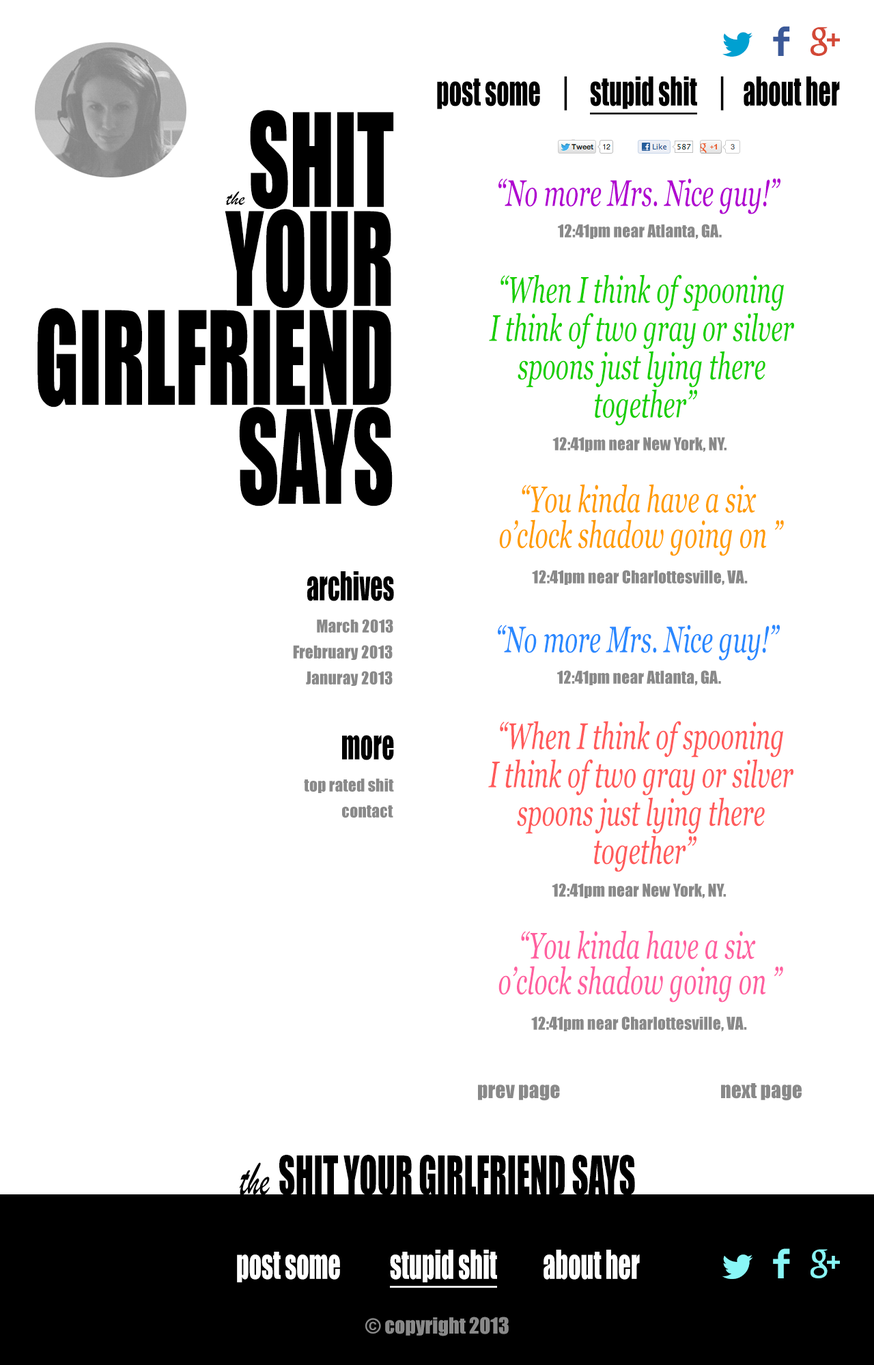
<style>
.page{position:relative;width:874px;height:1365px;background:#ffffff}
.page>*{position:absolute;margin:0}
.t1{font:36.9px "Impact";color:#000000;scale:0.67 1}
.t2{font:36.9px "Impact";color:#000000;text-decoration:underline;scale:0.67 1}
.t3{font:119.8px/99px "Impact";color:#000000;text-transform:uppercase;scale:0.67 1}
.t4{font:36.9px "Georgia-Italic";color:#b000d0;scale:0.67 1}
.t5{font:20.5px "BrushScriptMT";color:#000000}
.t6{font:16.4px "Impact";color:#898989}
.t7{font:36.9px/38.2px "Georgia-Italic";color:#18ce00;scale:0.67 1}
.t8{font:36.9px/35.5px "Georgia-Italic";color:#ff9c00;scale:0.67 1}
.t9{font:36.9px "Georgia-Italic";color:#2888ff;scale:0.67 1}
.t10{font:36.9px/38.2px "Georgia-Italic";color:#ff5a5a;scale:0.67 1}
.t11{font:36.9px/35.5px "Georgia-Italic";color:#ff5f9f;scale:0.67 1}
.t12{font:20.5px "Impact";color:#898989}
.t13{font:49.1px "Impact";color:#000000;text-transform:uppercase;scale:0.67 1}
.t14{font:49.1px "BrushScriptMT";color:#000000;scale:0.67 1}
.t15{font:36.9px "Impact";color:#ffffff;scale:0.67 1}
.t16{font:36.9px "Impact";color:#ffffff;text-decoration:underline;scale:0.67 1}
</style>
<div class="page">
<p class="t1" style="left:437px;top:76px;width:130px;height:35px">post some     |</p>
<p class="t2" style="left:590px;top:76px;width:133px;height:39px">stupid shit     <span class="t1">|</span></p>
<p class="t1" style="left:743px;top:76px;width:96px;height:30px">about her</p>
<p class="t3" style="left:38px;top:110px;width:356px;height:396px;text-align:right">shit<br>your<br>girlfriend<br>says</p>
<p class="t4" style="left:498px;top:178px;width:282px;height:36px">“No more Mrs. Nice guy!”</p>
<p class="t5" style="left:226px;top:191px;width:19px;height:14px">the</p>
<p class="t6" style="left:558px;top:224px;width:163px;height:16px">12:41pm near Atlanta, GA.</p>
<p class="t7" style="left:489px;top:274px;width:305px;height:152px;text-align:center">“When I think of spooning <br>I think of two gray or silver <br>spoons just lying there <br>together”</p>
<p class="t6" style="left:552px;top:437px;width:174px;height:15px">12:41pm near New York, NY.</p>
<p class="t8" style="left:499px;top:484px;width:284px;height:72px;text-align:center">“You kinda have a six <br>o’clock shadow going on ”</p>
<p class="t6" style="left:532px;top:570px;width:215px;height:16px">12:41pm near Charlottesville, VA.</p>
<p class="t1" style="left:307px;top:571px;width:87px;height:30px">archives</p>
<p class="t6" style="left:317px;top:619px;width:76px;height:14px">March 2013</p>
<p class="t9" style="left:498px;top:624px;width:281px;height:37px">“No more Mrs. Nice guy!”</p>
<p class="t6" style="left:293px;top:645px;width:99px;height:15px">Frebruary 2013</p>
<p class="t6" style="left:306px;top:671px;width:86px;height:15px">Januray 2013</p>
<p class="t6" style="left:557px;top:670px;width:164px;height:16px">12:41pm near Atlanta, GA.</p>
<p class="t10" style="left:488px;top:721px;width:305px;height:151px;text-align:center">“When I think of spooning <br>I think of two gray or silver <br>spoons just lying there <br>together”</p>
<p class="t1" style="left:342px;top:735px;width:52px;height:25px">more</p>
<p class="t6" style="left:304px;top:778px;width:90px;height:15px">top rated shit</p>
<p class="t6" style="left:342px;top:805px;width:51px;height:13px">contact</p>
<p class="t6" style="left:551px;top:883px;width:174px;height:16px">12:41pm near New York, NY.</p>
<p class="t11" style="left:498px;top:930px;width:285px;height:73px;text-align:center">“You kinda have a six <br>o’clock shadow going on ”</p>
<p class="t6" style="left:531px;top:1016px;width:216px;height:16px">12:41pm near Charlottesville, VA.</p>
<p class="t12" style="left:478px;top:1084px;width:82px;height:17px">prev page</p>
<p class="t12" style="left:721px;top:1083px;width:80px;height:18px">next page</p>
<p class="t13" style="left:240px;top:1155px;width:395px;height:41px"><span class="t14">the </span>shit your girlfriend says</p>
<p class="t15" style="left:237px;top:1252px;width:103px;height:30px">post some</p>
<p class="t16" style="left:390px;top:1250px;width:107px;height:38px">stupid shit</p>
<p class="t15" style="left:543px;top:1250px;width:96px;height:30px">about her</p>
<p class="t12" style="left:365px;top:1317px;width:143px;height:19px">© copyright 2013</p>
</div>
